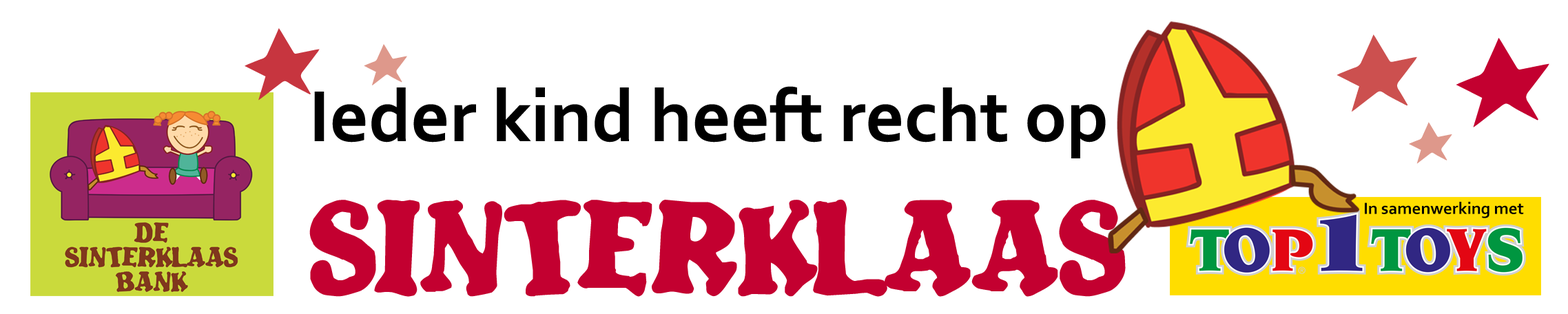
<style>
.page{position:relative;width:1568px;height:314px;background:#ffffff}
.page>*{position:absolute;margin:0}
.t1{font:75.8px "Corbel-Bold";color:#000000}
.t2{font:96.4px "Blatant";color:#c30030}
.t3{font:17.2px "Corbel-Bold";color:#000000}
</style>
<div class="page">
<p class="t1" style="left:314px;top:86px;width:792px;height:72px">Ieder kind heeft recht op</p>
<p class="t2" style="left:309px;top:199px;width:817px;height:98px">Sinterklaas</p>
<p class="t3" style="left:1365px;top:202px;width:159px;height:16px">In samenwerking met</p>
</div>
